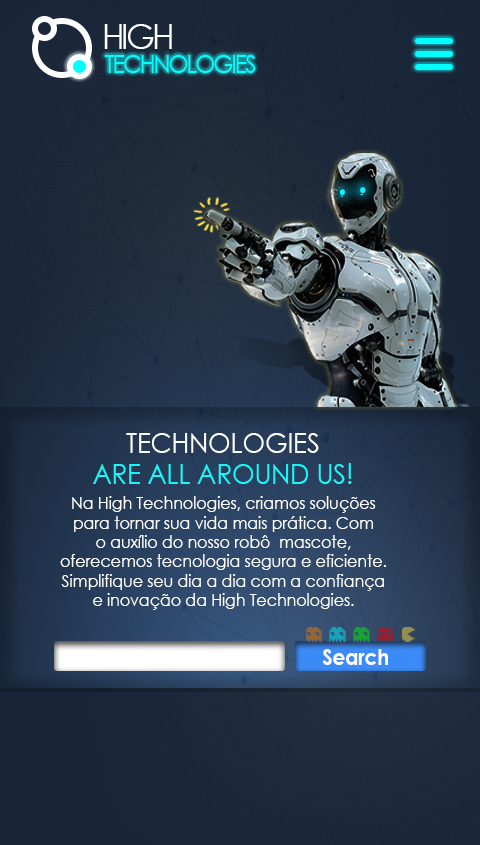
<style>
.page{position:relative;width:480px;height:845px}
.page>*{position:absolute;margin:0}
.t1{font:35.2px "CenturyGothic";letter-spacing:-0.08em;color:#ffffff;scale:0.93 1}
.t2{font:24.7px "CenturyGothic";letter-spacing:-0.08em;color:#00ffff;scale:0.93 1}
.t3{font:28.2px "CenturyGothic";letter-spacing:-0.01em;color:#15f8f8;scale:0.93 1}
.t4{font:28.2px "CenturyGothic";letter-spacing:-0.01em;color:#fefefe;scale:0.93 1}
.t5{font:17.4px "CenturyGothic";letter-spacing:-0.01em;color:#fefefe;scale:0.93 1}
.t6{font:21.7px "CenturyGothic-Bold";letter-spacing:-0.01em;color:#ffffff;scale:0.93 1}
</style>
<div class="page">
<p class="t1" style="left:104px;top:24px;width:68px;height:25px">HIGH</p>
<p class="t2" style="left:105px;top:55px;width:151px;height:18px">TECHNOLOGIES</p>
<p class="t3" style="left:93px;top:433px;width:259px;height:51px;text-align:center"><span class="t4">TECHNOLOGIES <br></span>ARE ALL AROUND US!</p>
<p class="t5" style="left:60px;top:496px;width:326px;height:114px;text-align:center">Na High Technologies, criamos soluções <br>para tornar sua vida mais prática. Com <br>o auxílio do nosso robô  mascote,<br>oferecemos tecnologia segura e eficiente.<br>Simplifique seu dia a dia com a confiança <br>e inovação da High Technologies.</p>
<p class="t6" style="left:322px;top:649px;width:66px;height:16px">Search</p>
</div>
